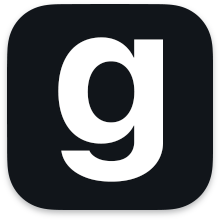
<style>
.page{position:relative;width:220px;height:220px;background:#11151a}
.page>*{position:absolute;margin:0}
.t1{font:201.3px "SFPro-Bold";color:#ffffff}
</style>
<div class="page">
<p class="t1" style="left:58px;top:37px;width:105px;height:145px">g</p>
</div>
